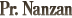
<style>
.page{position:relative;width:72px;height:18px;background:#ffffff}
.page>*{position:absolute;margin:0}
.t1{font:18px "RyuminPro-ExBold";letter-spacing:-0.08em;color:#4a3f32;font-weight:bold;scale:0.85 1}
</style>
<div class="page">
<p class="t1" style="left:0px;top:1px;width:73px;height:15px">Pr. Nanzan</p>
</div>
